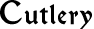
<style>
.page{position:relative;width:94px;height:29px;background:#ffffff}
.page>*{position:absolute;margin:0}
.t1{font:24px "Kelmscott-Regular";letter-spacing:0.05em;color:#000000}
.t2{font:30px "Kelmscott-Regular";letter-spacing:0.05em;color:#000000}
</style>
<div class="page">
<p class="t1" style="left:0px;top:0px;width:92px;height:29px"><span class="t2">C</span>utlery</p>
</div>
